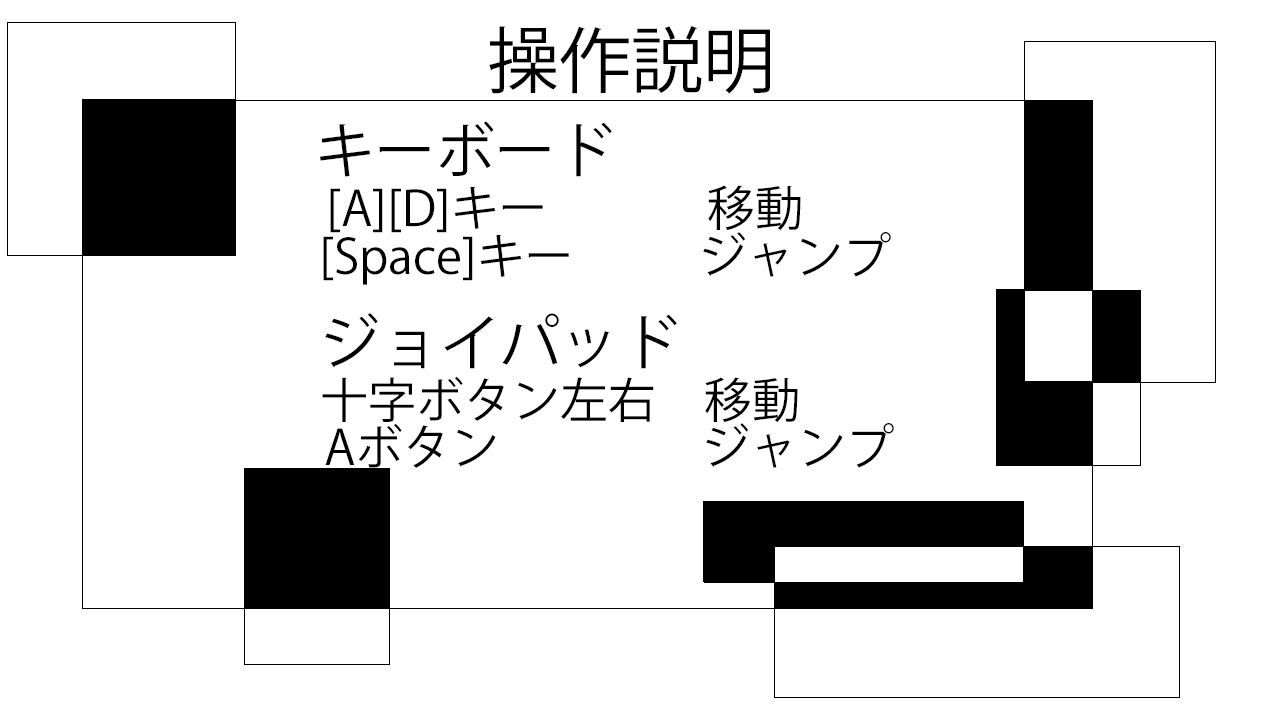
<style>
.page{position:relative;width:1280px;height:720px;background:#ffffff}
.page>*{position:absolute;margin:0}
.t1{font:72px "KozGoPr6N-Regular";color:#000000}
.t2{font:60px "KozGoPr6N-Regular";color:#000000}
.t3{font:48px "KozGoPr6N-Regular";color:#000000}
</style>
<div class="page">
<p class="t1" style="left:489px;top:26px;width:281px;height:68px">操作説明</p>
<p class="t2" style="left:320px;top:121px;width:292px;height:56px">キーボード</p>
<p class="t3" style="left:330px;top:185px;width:471px;height:48px">[A][D]キー　          移動</p>
<p class="t3" style="left:323px;top:232px;width:568px;height:53px">[Space]キー        ジャンプ</p>
<p class="t2" style="left:325px;top:313px;width:352px;height:56px">ジョイパッド</p>
<p class="t3" style="left:322px;top:376px;width:476px;height:47px">十字ボタン左右　移動</p>
<p class="t3" style="left:325px;top:423px;width:569px;height:45px">Aボタン　　　　 ジャンプ</p>
</div>
